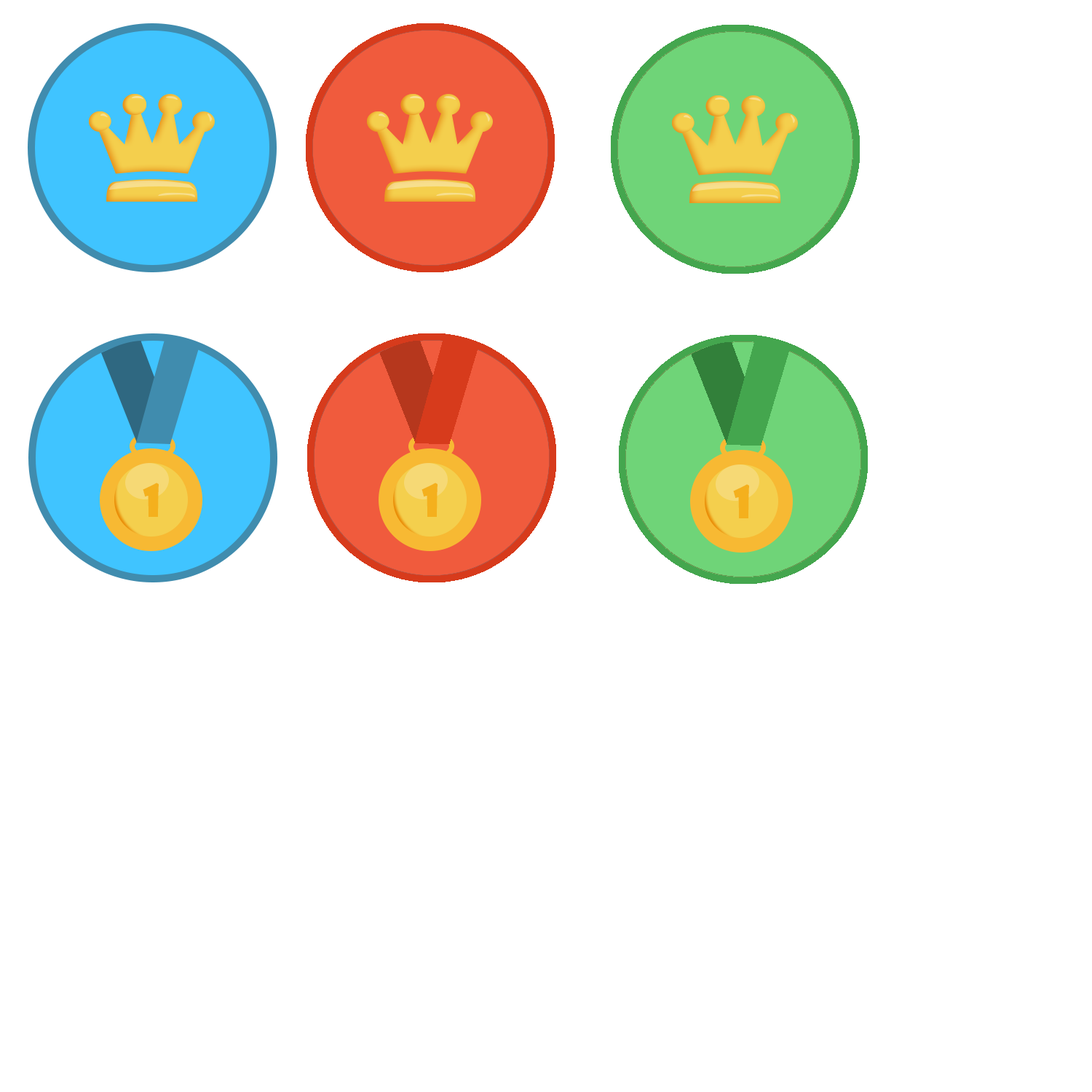
<style>
.page{position:relative;width:1092px;height:1092px;background:#ffffff}
.page>*{position:absolute;margin:0}
.t1{font:43.7px "ShowcardGothic-Reg";color:#f4b01d}
</style>
<div class="page">
<p class="t1" style="left:143px;top:483px;width:16px;height:34px">1</p>
<p class="t1" style="left:422px;top:483px;width:16px;height:34px">1</p>
<p class="t1" style="left:733px;top:484px;width:16px;height:34px">1</p>
</div>
